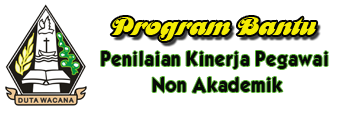
<style>
.page{position:relative;width:340px;height:113px;background:#ffffff}
.page>*{position:absolute;margin:0}
.t1{font:26.7px "MotterFemD";color:#f4ed04;scale:0.95 1}
.t2{font:17.6px "KabelBdNormal";color:#080808;scale:0.9 1}
</style>
<div class="page">
<p class="t1" style="left:111px;top:17px;width:206px;height:24px">Program Bantu</p>
<p class="t2" style="left:101px;top:51px;width:227px;height:18px">Penilaian Kinerja Pegawai</p>
<p class="t2" style="left:152px;top:77px;width:131px;height:16px">Non Akademik</p>
</div>
